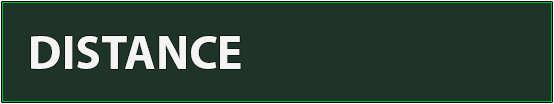
<style>
.page{position:relative;width:554px;height:104px;background:#1f3428}
.page>*{position:absolute;margin:0}
.t1{font:48px "MyriadHebrew-Bold";color:#f4f4f4}
</style>
<div class="page">
<p class="t1" style="left:31px;top:36px;width:210px;height:33px">DISTANCE</p>
</div>
